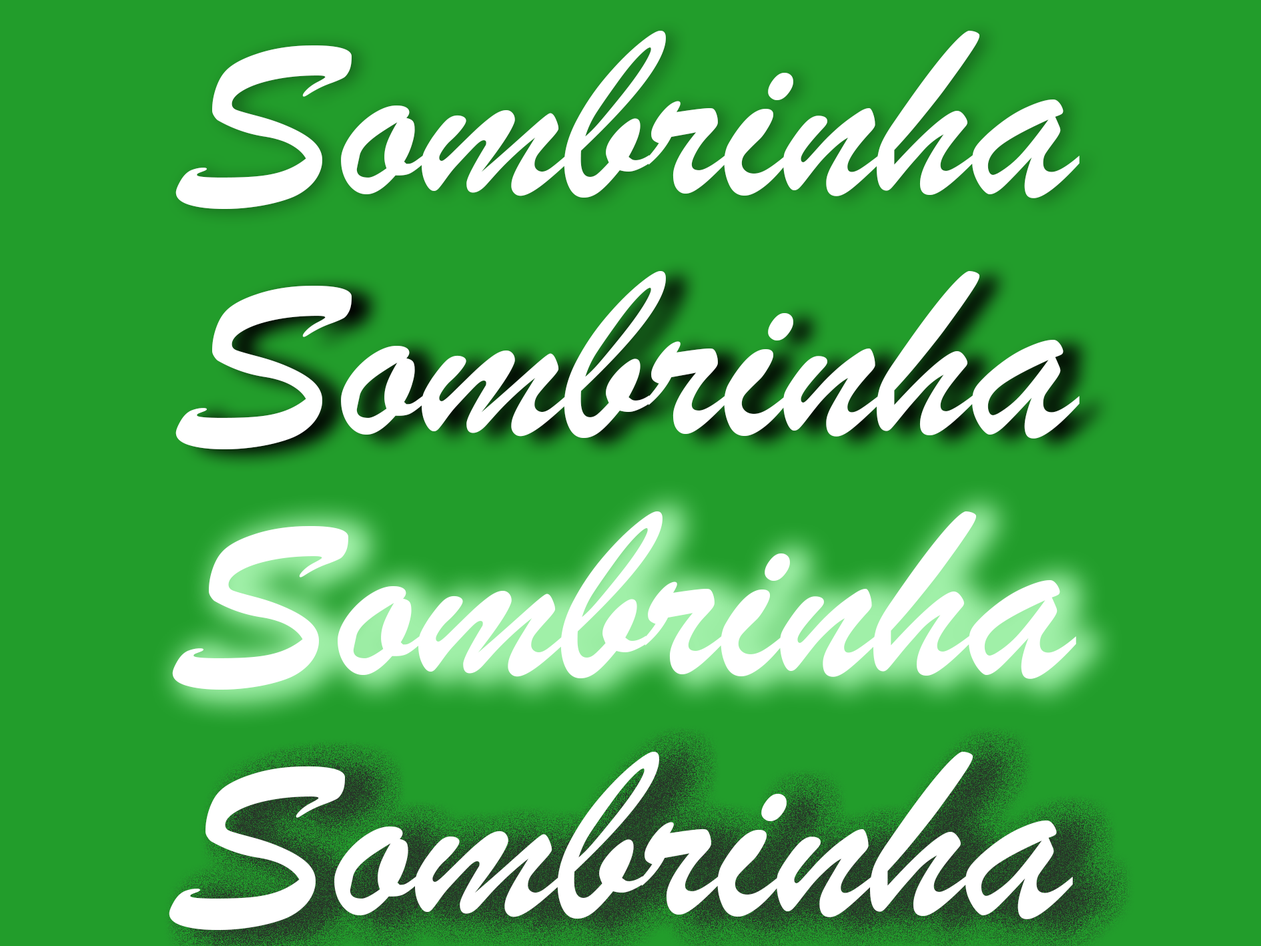
<style>
.page{position:relative;width:1261px;height:946px;background:#229d2b}
.page>*{position:absolute;margin:0}
.t1{font:253.4px "BrushScriptMT";color:#ffffff}
</style>
<div class="page">
<p class="t1" style="left:175px;top:31px;width:905px;height:178px">Sombrinha</p>
<p class="t1" style="left:175px;top:271px;width:905px;height:178px">Sombrinha</p>
<p class="t1" style="left:172px;top:511px;width:904px;height:178px">Sombrinha</p>
<p class="t1" style="left:169px;top:751px;width:904px;height:179px">Sombrinha</p>
</div>
